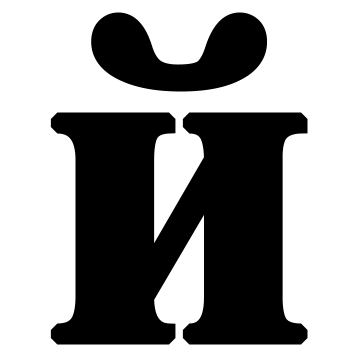
<style>
.page{position:relative;width:361px;height:361px;background:#ffffff}
.page>*{position:absolute;margin:0}
.t1{font:480px "TimesNewRomanPS-BoldMT";color:#000000;font-weight:bold}
</style>
<div class="page">
<p class="t1" style="left:50px;top:12px;width:258px;height:333px">й</p>
</div>
